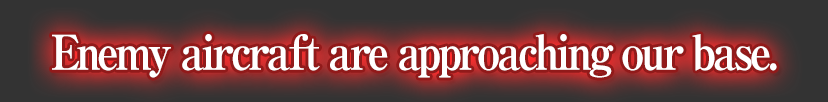
<style>
.page{position:relative;width:828px;height:102px;background:#333333}
.page>*{position:absolute;margin:0}
.t1{font:48px "RyuminPro-ExBold";letter-spacing:-0.08em;color:#ffffff;scale:0.9 1}
</style>
<div class="page">
<p class="t1" style="left:52px;top:34px;width:725px;height:44px">Enemy aircraft are approaching our base.</p>
</div>
